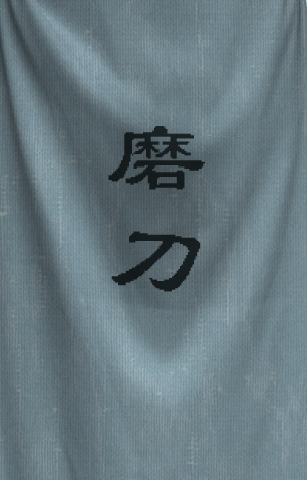
<style>
.page{position:relative;width:307px;height:480px}
.page>*{position:absolute;margin:0}
.t1{font:101.7px "Á¥Êé-Regular";color:#202a2d}
</style>
<div class="page">
<p class="t1" style="left:108px;top:126px;width:97px;height:166px">磨刀</p>
</div>
